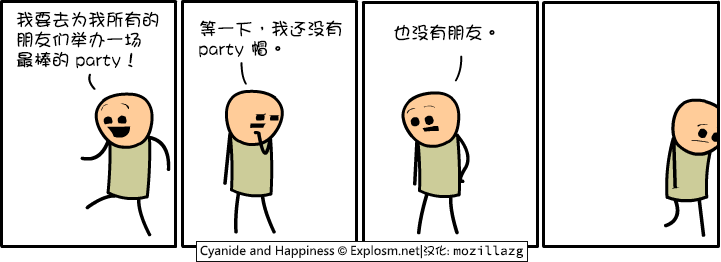
<style>
.page{position:relative;width:721px;height:262px;background:#ffffff}
.page>*{position:absolute;margin:0}
.t1{font:18px/20px "DFGirl";color:#000000}
.t2{font:18px "DFGirl";color:#000000}
</style>
<div class="page">
<p class="t1" style="left:16px;top:11px;width:143px;height:58px">我要去为我所有的<br>朋友们举办一场<br>最棒的 party！</p>
<p class="t1" style="left:199px;top:20px;width:143px;height:38px">等一下，我还没有<br>party 帽。</p>
<p class="t2" style="left:394px;top:24px;width:101px;height:17px">也没有朋友。</p>
</div>
